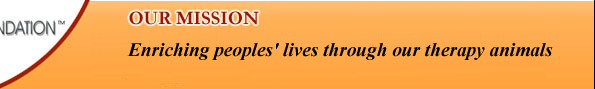
<style>
.page{position:relative;width:595px;height:89px}
.page>*{position:absolute;margin:0}
.t1{font:19.2px "TimesNewRomanPS-BoldItalicMT";color:#000000}
</style>
<div class="page">
<p class="t1" style="left:127px;top:43px;width:426px;height:17px">Enriching peoples' lives through our therapy animals</p>
</div>
